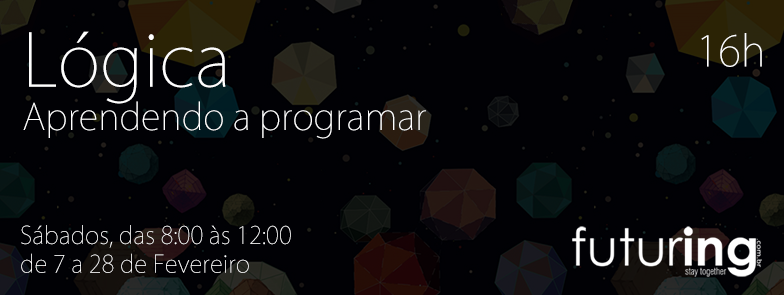
<style>
.page{position:relative;width:784px;height:295px;background:#010105}
.page>*{position:absolute;margin:0}
.t1{font:36px "KozGoPro-ExtraLight";color:#ffffff}
.t2{font:72px "KozGoPro-ExtraLight";color:#ffffff}
.t3{font:42px "KozGoPro-ExtraLight";color:#ffffff}
.t4{font:24px "KozGoPro-ExtraLight";color:#ffffff}
</style>
<div class="page">
<p class="t1" style="left:23px;top:31px;width:403px;height:108px"><span class="t2">Lógica<br></span>Aprendendo a programar</p>
<p class="t3" style="left:701px;top:33px;width:61px;height:34px">16h</p>
<p class="t4" style="left:21px;top:225px;width:270px;height:48px">Sábados, das 8:00 às 12:00<br>de 7 a 28 de Fevereiro</p>
</div>
